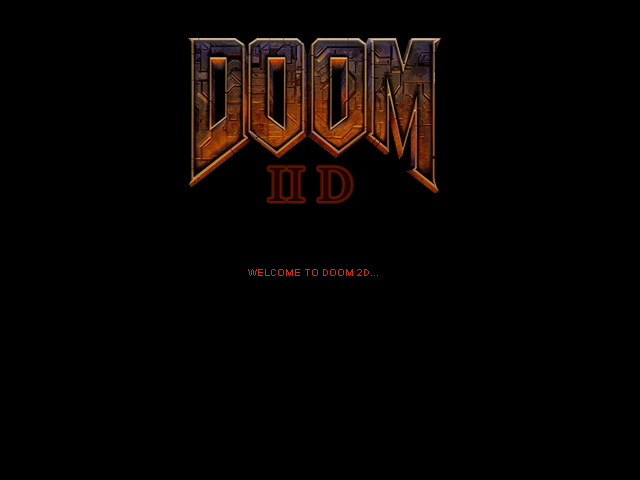
<style>
.page{position:relative;width:640px;height:480px;background:#000000}
.page>*{position:absolute;margin:0}
.t1{font:48px "Georgia";color:#230000}
.t2{font:10px "ArialMT";color:#cc3300}
</style>
<div class="page">
<p class="t1" style="left:269px;top:167px;width:82px;height:34px">II D</p>
<p class="t2" style="left:248px;top:269px;width:130px;height:7px">WELCOME TO DOOM 2D...</p>
</div>
